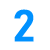
<style>
.page{position:relative;width:50px;height:50px;background:#ffffff}
.page>*{position:absolute;margin:0}
.t1{font:75px "Bahnschrift";letter-spacing:0.01em;color:#0091ff;font-weight:bold}
</style>
<div class="page">
<p class="t1" style="left:14px;top:9px;width:20px;height:33px">2</p>
</div>
